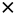
<style>
.page{position:relative;width:16px;height:14px;background:#ffffff}
.page>*{position:absolute;margin:0}
.t1{font:20.4px "Verdana";color:#000000}
</style>
<div class="page">
<p class="t1" style="left:2px;top:2px;width:12px;height:11px">×</p>
</div>
